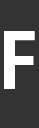
<style>
.page{position:relative;width:39px;height:128px;background:#333333}
.page>*{position:absolute;margin:0}
.t1{font:75px "AdobeGothicStd-Bold";color:#ffffff}
</style>
<div class="page">
<p class="t1" style="left:4px;top:31px;width:31px;height:58px">F</p>
</div>
